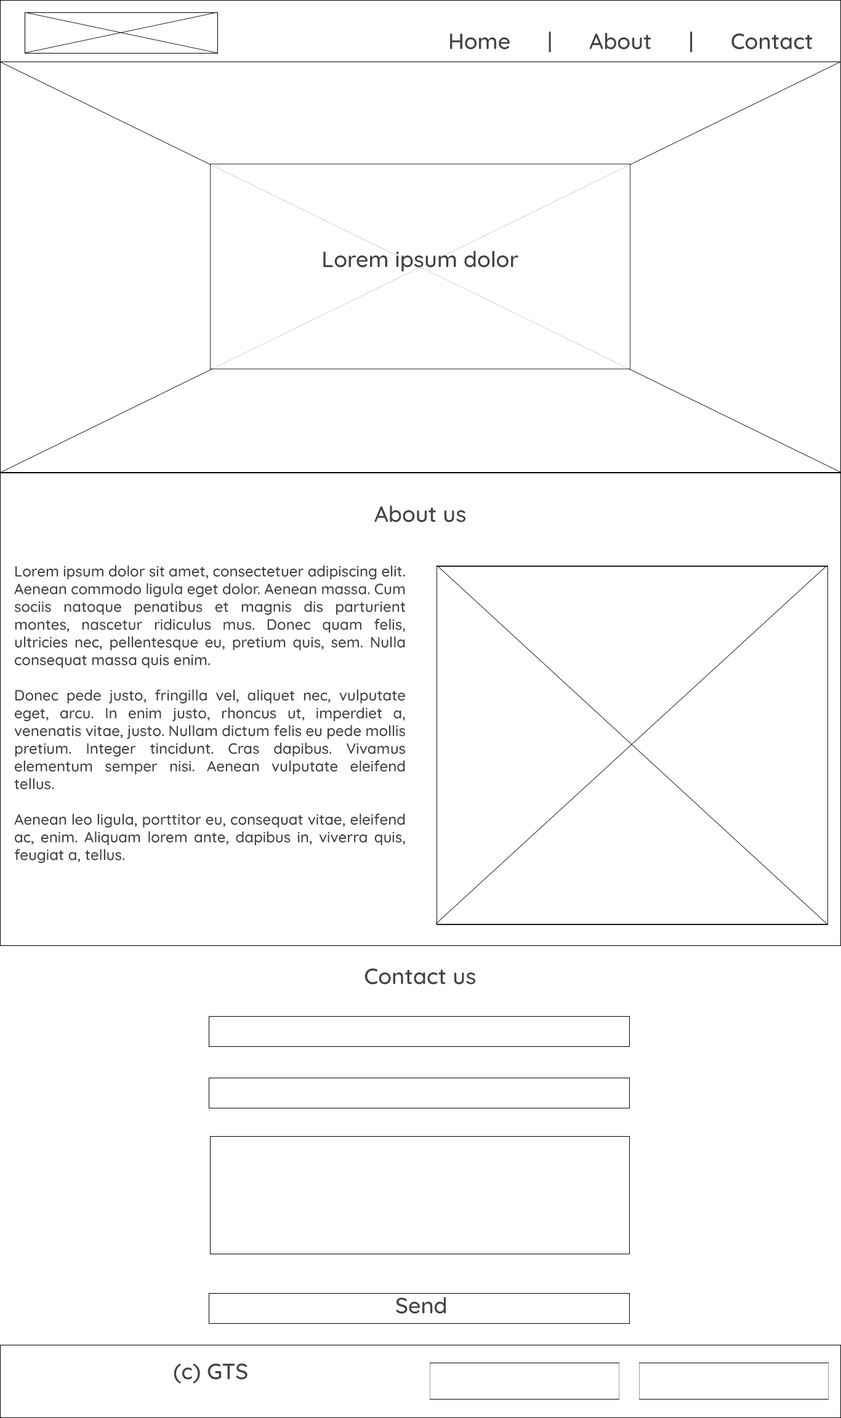
<style>
.page{position:relative;width:841px;height:1418px;background:#ffffff}
.page>*{position:absolute;margin:0}
.t1{font:22.2px "Quicksand-Medium";color:#444444}
.t2{font:14.8px "Quicksand-Medium";color:#444444}
</style>
<div class="page">
<p class="t1" style="left:450px;top:31px;width:363px;height:21px">Home      |      About      |      Contact</p>
<p class="t1" style="left:323px;top:251px;width:195px;height:21px">Lorem ipsum dolor</p>
<p class="t1" style="left:374px;top:505px;width:91px;height:18px">About us</p>
<p class="t2" style="left:14px;top:565px;width:392px;height:299px;text-align:justify">Lorem ipsum dolor sit amet, consectetuer adipiscing elit. Aenean commodo ligula eget dolor. Aenean massa. Cum sociis natoque penatibus et magnis dis parturient montes, nascetur ridiculus mus. Donec quam felis, ultricies nec, pellentesque eu, pretium quis, sem. Nulla consequat massa quis enim.<br><br>Donec pede justo, fringilla vel, aliquet nec, vulputate eget, arcu. In enim justo, rhoncus ut, imperdiet a, venenatis vitae, justo. Nullam dictum felis eu pede mollis pretium. Integer tincidunt. Cras dapibus. Vivamus elementum semper nisi. Aenean vulputate eleifend tellus.<br><br>Aenean leo ligula, porttitor eu, consequat vitae, eleifend ac, enim. Aliquam lorem ante, dapibus in, viverra quis, feugiat a, tellus.</p>
<p class="t1" style="left:364px;top:968px;width:111px;height:17px">Contact us</p>
<p class="t1" style="left:396px;top:1297px;width:50px;height:17px">Send</p>
<p class="t1" style="left:174px;top:1363px;width:73px;height:21px">(c) GTS</p>
</div>
